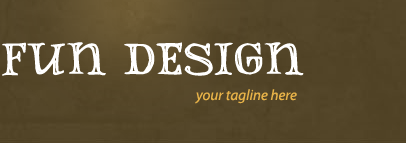
<style>
.page{position:relative;width:406px;height:143px}
.page>*{position:absolute;margin:0}
.t1{font:48px "DannetteOutline";color:#ffffff}
.t2{font:15px "MyriadPro-It";color:#e7b248}
</style>
<div class="page">
<p class="t1" style="left:2px;top:42px;width:302px;height:34px">FUN DESIGN</p>
<p class="t2" style="left:195px;top:89px;width:102px;height:15px">your tagline here</p>
</div>
